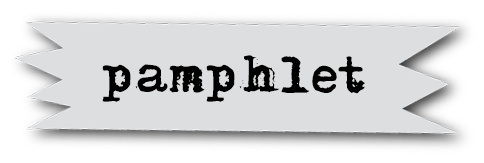
<style>
.page{position:relative;width:484px;height:163px;background:#dddedf}
.page>*{position:absolute;margin:0}
.t1{font:45.8px "Adler";color:#000000}
</style>
<div class="page">
<p class="t1" style="left:102px;top:55px;width:263px;height:47px">pamphlet</p>
</div>
